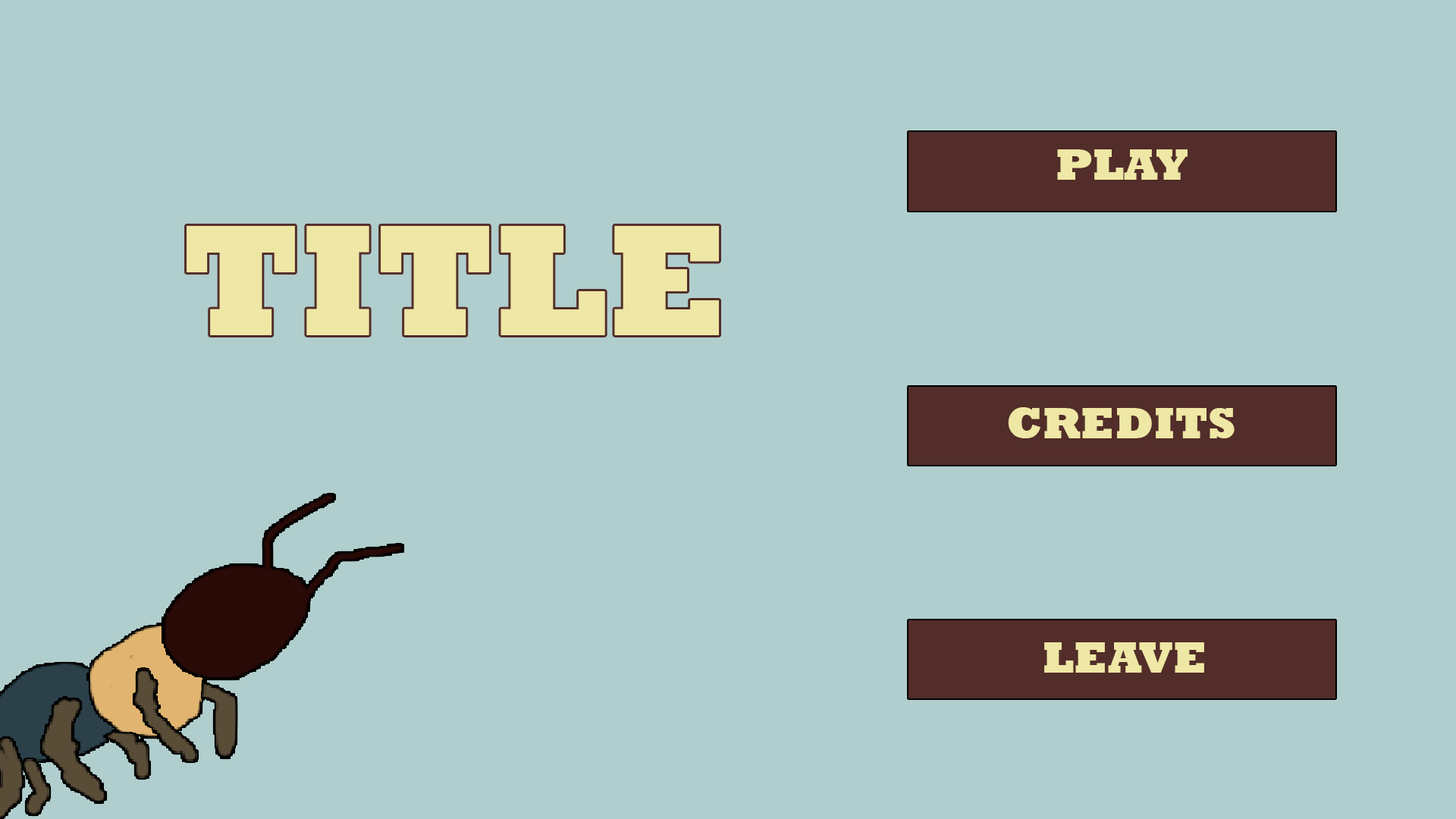
<style>
.page{position:relative;width:1456px;height:819px;background:#b0cecd}
.page>*{position:absolute;margin:0}
.t1{font:44.9px "Rockwell-ExtraBold";color:#efe7a5}
.t2{font:160.9px "Rockwell-ExtraBold";color:#efe7a5}
</style>
<div class="page">
<p class="t1" style="left:1057px;top:149px;width:131px;height:31px">PLAY</p>
<p class="t2" style="left:187px;top:225px;width:532px;height:110px">TITLE</p>
<p class="t1" style="left:1008px;top:407px;width:227px;height:31px">CREDITS</p>
<p class="t1" style="left:1044px;top:642px;width:160px;height:31px">LEAVE</p>
</div>
